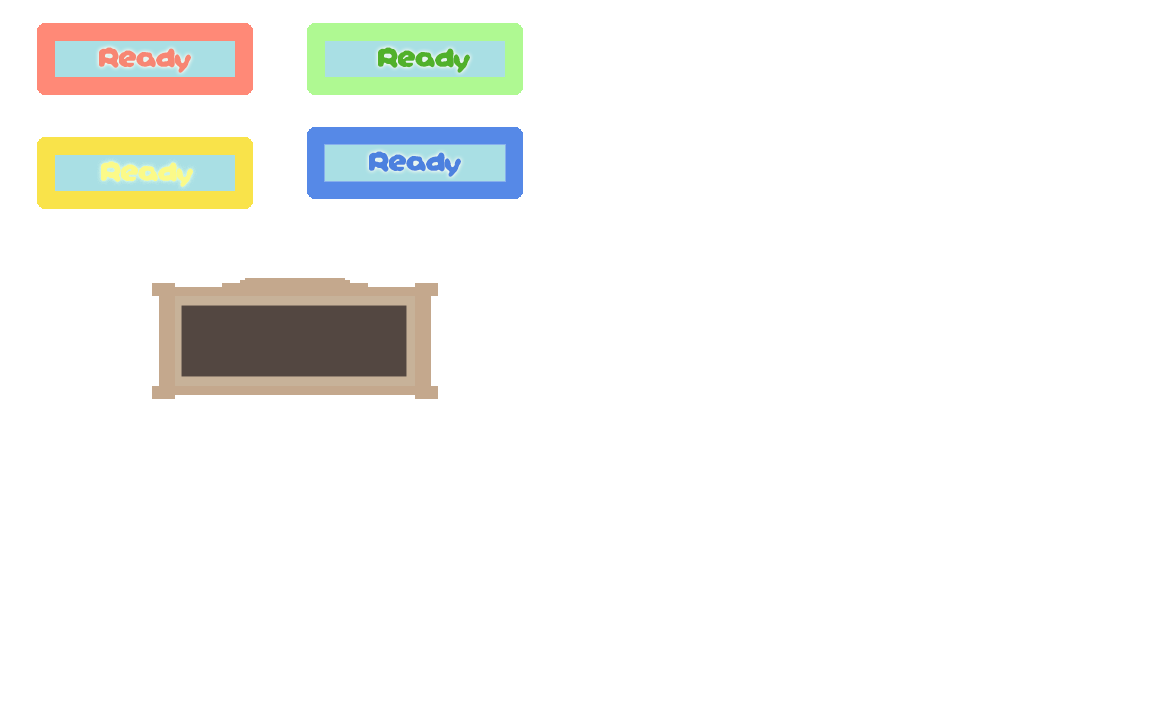
<style>
.page{position:relative;width:1152px;height:720px;background:#ffffff}
.page>*{position:absolute;margin:0}
.t1{font:29px "Yoshi'sStorygametextBRK";color:#f78673}
.t2{font:29px "Yoshi'sStorygametextBRK";color:#51b12b}
.t3{font:29px "Yoshi'sStorygametextBRK";color:#fbfa89}
.t4{font:29px "Yoshi'sStorygametextBRK";color:#4c81df}
</style>
<div class="page">
<p class="t1" style="left:99px;top:47px;width:92px;height:26px">Ready</p>
<p class="t2" style="left:378px;top:47px;width:92px;height:26px">Ready</p>
<p class="t3" style="left:101px;top:161px;width:92px;height:26px">Ready</p>
<p class="t4" style="left:369px;top:151px;width:92px;height:26px">Ready</p>
</div>
